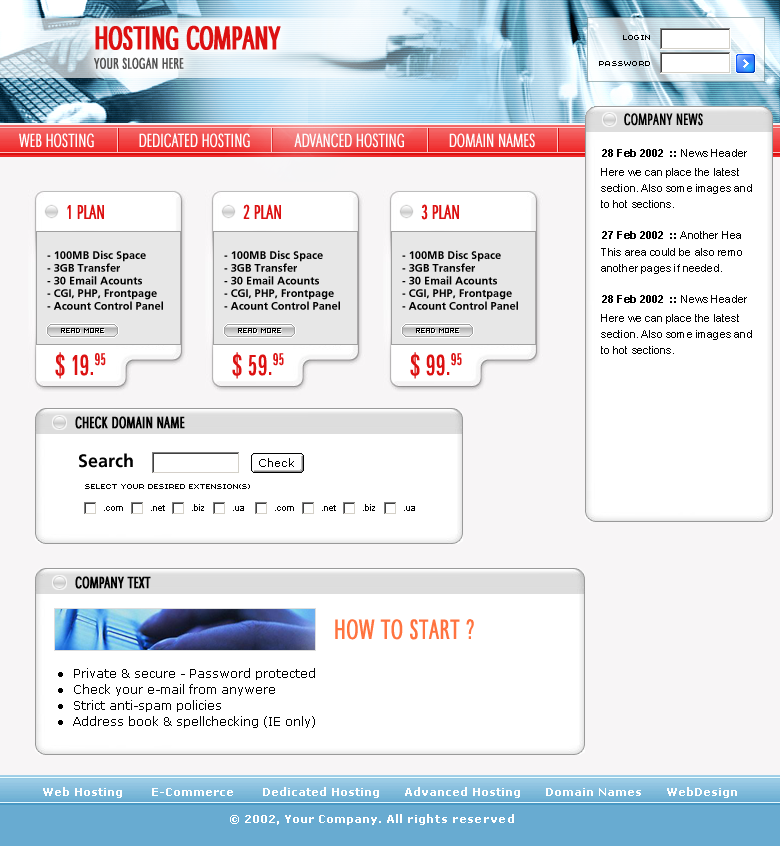
<style>
.page{position:relative;width:780px;height:846px;background:#ffffff}
.page>*{position:absolute;margin:0}
.t1{font:16px/19.7px "MaximaCyrTCY-LighComp";letter-spacing:0.02em;color:#535353}
.t2{font:34px/19.7px "MaximaCyrTCY-LighComp";letter-spacing:-0.02em;color:#dc1111;font-weight:bold}
.t3{font:17px "MaximaCyrTCY-LighComp";letter-spacing:0.02em;color:#000000}
.t4{font:20px "MaximaCyrTCY-LighComp";color:#ffffff}
.t5{font:21px "MaximaCyrTCY-LighComp";color:#dc1111}
.t6{font:11px/12.7px "AGForeignerLightBoldBold";color:#000000}
.t7{font:30px "MaximaCyrTCY-LighComp";color:#dc1111}
.t8{font:17px "MaximaCyrTCY-LighComp";color:#000000;font-weight:bold}
.t9{font:18px "AGForeignerLightBoldBold";color:#000000}
.t10{font:29px "MaximaCyrTCY-LighComp";letter-spacing:0.02em;color:#ff733f}
.t11{font:11px "Verdana-Bold";color:#ffffff}
</style>
<div class="page">
<p class="t1" style="left:94px;top:25px;width:187px;height:44px"><span class="t2">HOSTING COMPANY<br></span>YOUR SLOGAN HERE</p>
<p class="t3" style="left:624px;top:113px;width:79px;height:13px">COMPANY NEWS</p>
<p class="t4" style="left:19px;top:133px;width:516px;height:15px">WEB HOSTING            DEDICATED HOSTING            ADVANCED HOSTING            DOMAIN NAMES</p>
<p class="t5" style="left:67px;top:204px;width:37px;height:15px">1 PLAN</p>
<p class="t5" style="left:243px;top:204px;width:38px;height:15px">2 PLAN</p>
<p class="t5" style="left:421px;top:204px;width:38px;height:16px">3 PLAN</p>
<p class="t6" style="left:47px;top:250px;width:116px;height:60px">- 100MB Disc Space<br>- 3GB Transfer<br>- 30 Email Acounts<br>- CGI, PHP, Frontpage <br>- Acount Control Panel</p>
<p class="t6" style="left:224px;top:250px;width:116px;height:60px">- 100MB Disc Space<br>- 3GB Transfer<br>- 30 Email Acounts<br>- CGI, PHP, Frontpage <br>- Acount Control Panel</p>
<p class="t6" style="left:402px;top:250px;width:116px;height:60px">- 100MB Disc Space<br>- 3GB Transfer<br>- 30 Email Acounts<br>- CGI, PHP, Frontpage <br>- Acount Control Panel</p>
<p class="t7" style="left:55px;top:352px;width:51px;height:27px">$ 19.95</p>
<p class="t7" style="left:232px;top:352px;width:52px;height:27px">$ 59.95</p>
<p class="t7" style="left:410px;top:352px;width:52px;height:27px">$ 99.95</p>
<p class="t8" style="left:75px;top:416px;width:110px;height:13px">CHECK DOMAIN NAME</p>
<p class="t9" style="left:79px;top:453px;width:54px;height:15px">Search</p>
<p class="t8" style="left:75px;top:576px;width:76px;height:13px">COMPANY TEXT</p>
<p class="t10" style="left:335px;top:619px;width:139px;height:21px">HOW TO START ?</p>
<p class="t11" style="left:43px;top:787px;width:694px;height:11px">Web Hosting       E-Commerce       Dedicated Hosting      Advanced Hosting      Domain Names      WebDesign</p>
<p class="t11" style="left:230px;top:814px;width:284px;height:11px">© 2002, Your Company. All rights reserved</p>
</div>
